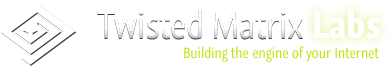
<style>
.page{position:relative;width:389px;height:66px;background:#ffffff}
.page>*{position:absolute;margin:0}
.t1{font:36px "GraublauWeb-Bold";color:#ffffff}
.t2{font:14px "GraublauWeb-Regular";color:#bce715}
</style>
<div class="page">
<p class="t1" style="left:314px;top:8px;width:66px;height:31px">Labs</p>
<p class="t2" style="left:184px;top:46px;width:195px;height:16px">Building the engine of your Internet</p>
</div>
